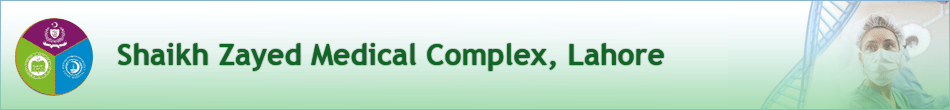
<style>
.page{position:relative;width:950px;height:110px}
.page>*{position:absolute;margin:0}
.t1{font:30px "TrebuchetMS-Bold";color:#0e6823}
</style>
<div class="page">
<p class="t1" style="left:118px;top:43px;width:546px;height:28px">Shaikh Zayed Medical Complex, Lahore</p>
</div>
